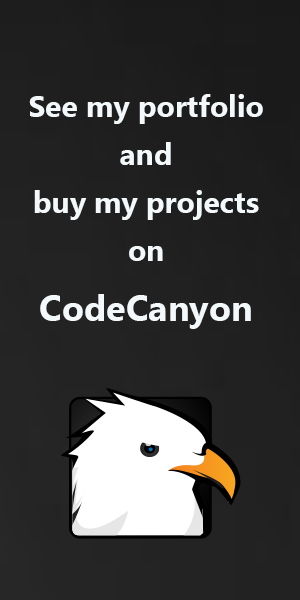
<style>
.page{position:relative;width:300px;height:600px}
.page>*{position:absolute;margin:0}
.t1{font:30px/48px "SegoeUI-Bold";color:#f3f8fb}
.t2{font:36px/60px "SegoeUI-Bold";color:#f3f8fb}
</style>
<div class="page">
<p class="t1" style="left:29px;top:94px;width:234px;height:235px;text-align:center">See my portfolio<br>and<br>buy my projects<br>on<br><span class="t2">CodeCanyon</span></p>
</div>
